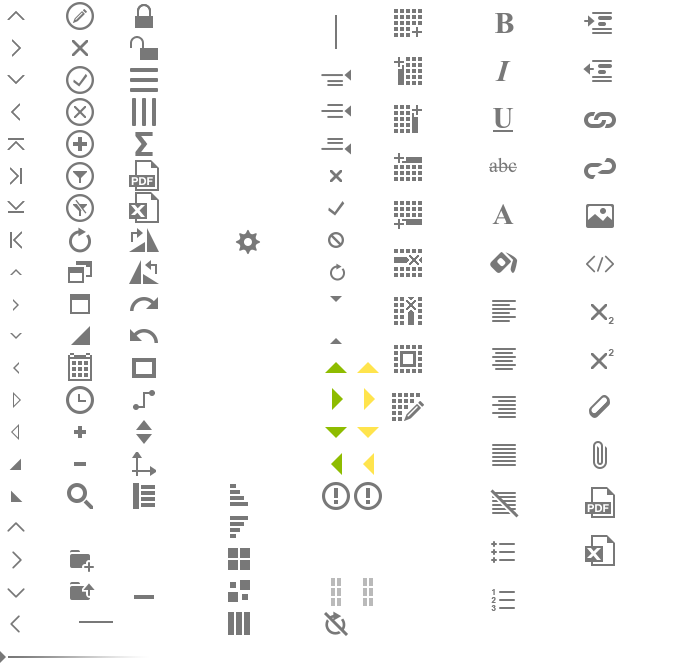
<style>
.page{position:relative;width:680px;height:672px;background:#ffffff}
.page>*{position:absolute;margin:0}
.t1{font:10px "Arial-BoldMT";color:#787878}
.t2{font:8px/8px "Arial-BoldMT";color:#787878}
</style>
<div class="page">
<p class="t1" style="left:608px;top:317px;width:6px;height:7px">2</p>
<p class="t1" style="left:608px;top:349px;width:6px;height:7px">2</p>
<p class="t2" style="left:491px;top:589px;width:5px;height:22px">1<br>2<br>3</p>
</div>
